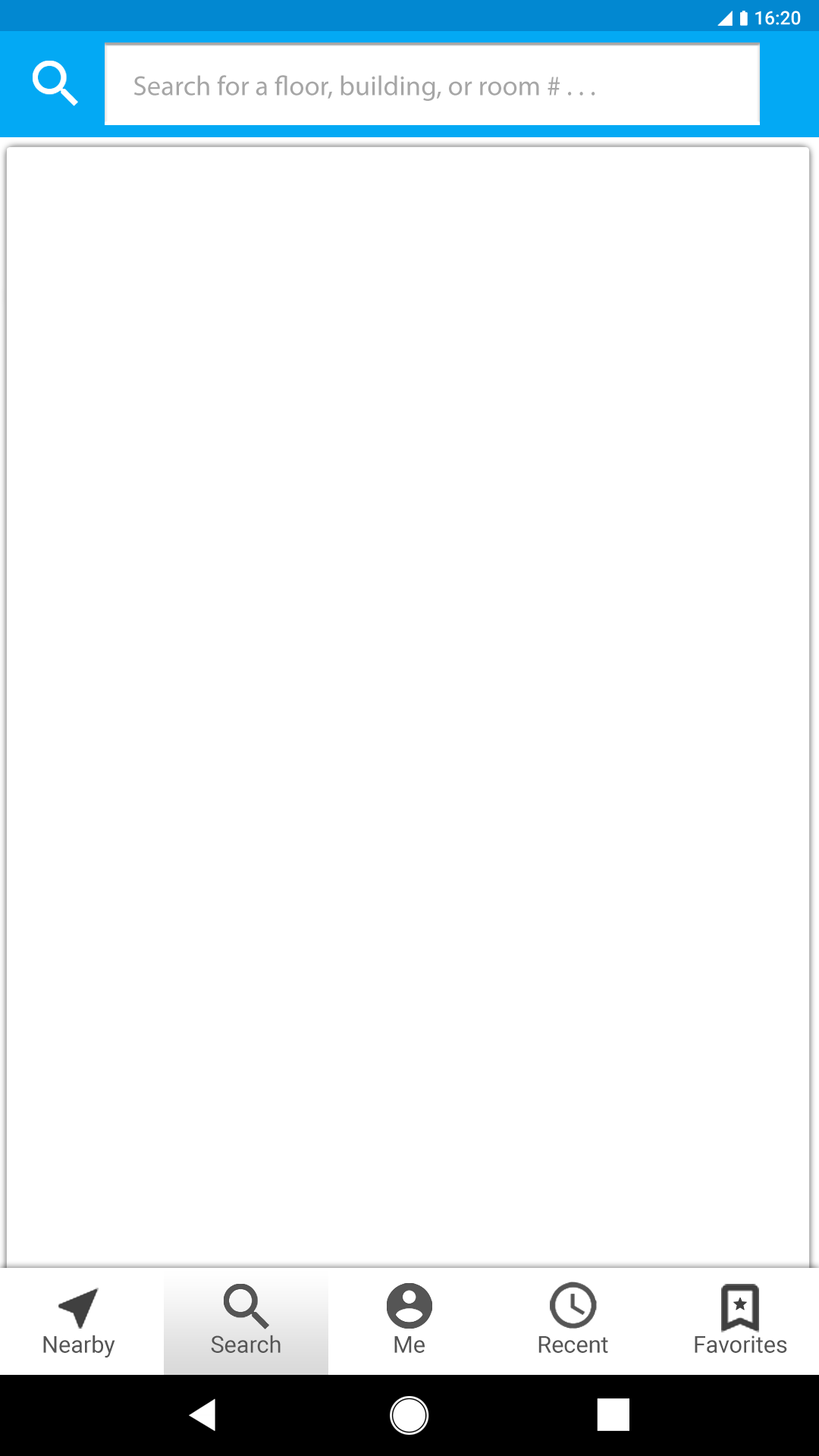
<style>
.page{position:relative;width:819px;height:1456px;background:#ffffff}
.page>*{position:absolute;margin:0}
.t1{font:27.9px "MyriadPro-Regular";color:#a6a6a6}
.t2{font:23.2px "Roboto-Regular";color:#555555}
</style>
<div class="page">
<p class="t1" style="left:134px;top:75px;width:461px;height:26px">Search for a floor, building, or room # . . .</p>
<p class="t2" style="left:43px;top:1335px;width:72px;height:23px">Nearby</p>
<p class="t2" style="left:211px;top:1335px;width:70px;height:18px">Search</p>
<p class="t2" style="left:394px;top:1336px;width:31px;height:17px">Me</p>
<p class="t2" style="left:538px;top:1336px;width:70px;height:17px">Recent</p>
<p class="t2" style="left:695px;top:1335px;width:92px;height:18px">Favorites</p>
</div>
